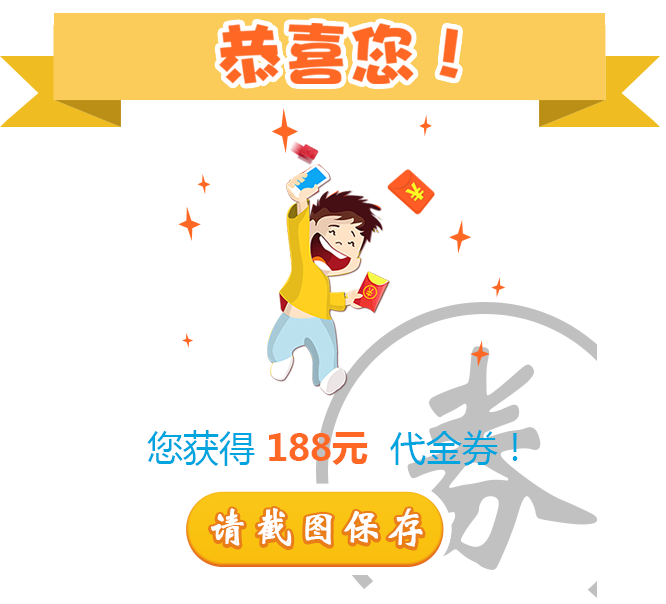
<style>
.page{position:relative;width:666px;height:604px;background:#ffffff}
.page>*{position:absolute;margin:0}
.t1{font:67.6px "DFPHaiBaoW12";color:#ff6724}
.t2{font:36.7px "MicrosoftYaHei-Bold";color:#ff6724}
.t3{font:36.7px "MicrosoftYaHei";color:#00a4de}
.t4{font:41.6px "STXinwei";letter-spacing:0.075em;color:#ffffff;font-weight:bold}
</style>
<div class="page">
<p class="t1" style="left:219px;top:23px;width:239px;height:61px">恭喜您！</p>
<p class="t2" style="left:147px;top:430px;width:371px;height:36px"><span class="t3"><br>您获得 </span>188元  <span class="t3">代金券！</span></p>
<p class="t4" style="left:211px;top:508px;width:212px;height:39px">请截图保存</p>
</div>
